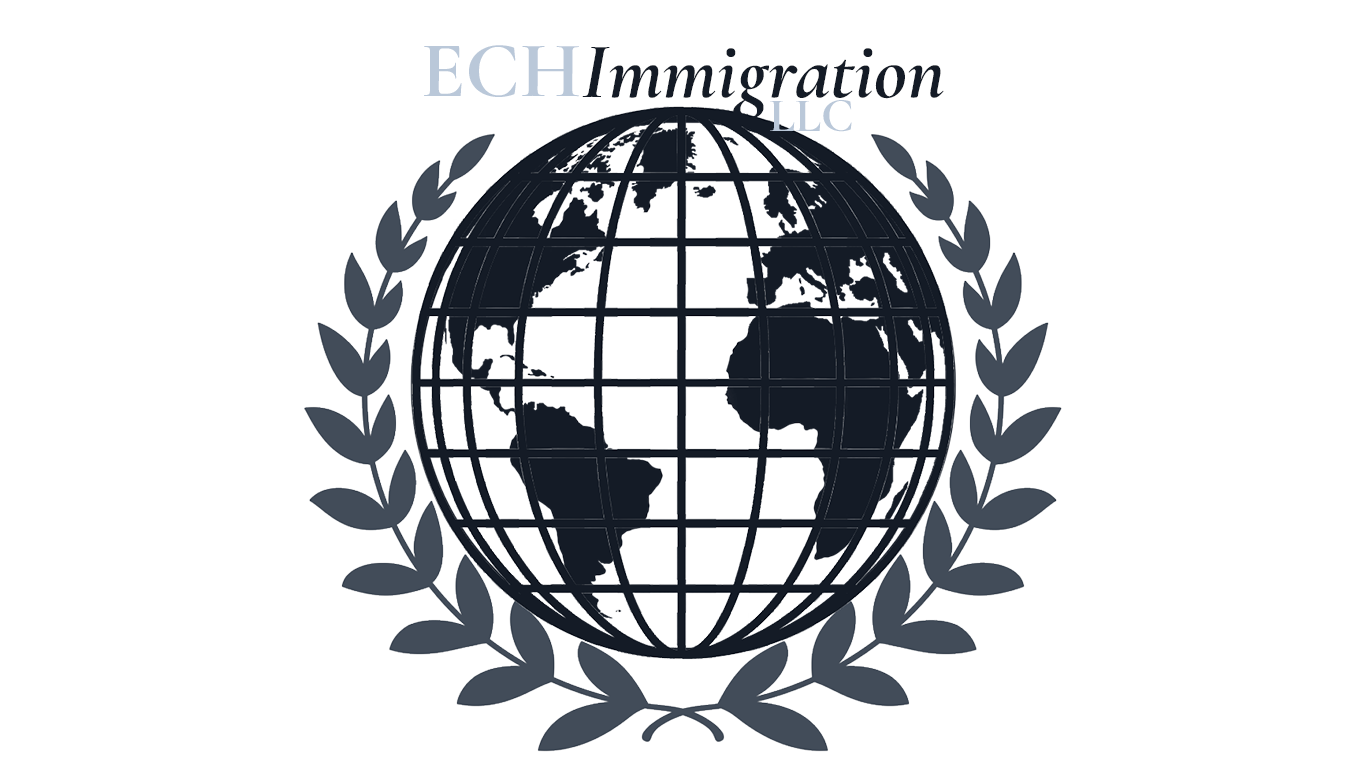
<style>
.page{position:relative;width:1366px;height:768px;background:#ffffff}
.page>*{position:absolute;margin:0}
.t1{font:80px "CormorantGaramond-BoldItalic";color:#141b26}
.t2{font:80px "CormorantGaramond-Bold";color:#bac8d9}
.t3{font:48px "CormorantGaramond-Bold";color:#bac8d9}
</style>
<div class="page">
<p class="t1" style="left:424px;top:45px;width:520px;height:75px"><span class="t2">ECH</span>Immigration</p>
<p class="t3" style="left:770px;top:100px;width:82px;height:32px">LLC</p>
</div>
